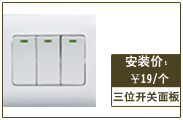
<style>
.page{position:relative;width:183px;height:120px;background:#ffffff}
.page>*{position:absolute;margin:0}
.t1{font:12.6px "HeitiCSEG";color:#ffffff}
.t2{font:11.1px "HeitiCSEG";color:#ffffff}
.t3{font:11.1px "HeitiCSEG";color:#4b4221}
</style>
<div class="page">
<p class="t1" style="left:125px;top:55px;width:42px;height:13px">安装价：</p>
<p class="t2" style="left:131px;top:73px;width:38px;height:11px">￥19/个</p>
<p class="t3" style="left:113px;top:91px;width:67px;height:11px">三位开关面板</p>
</div>
